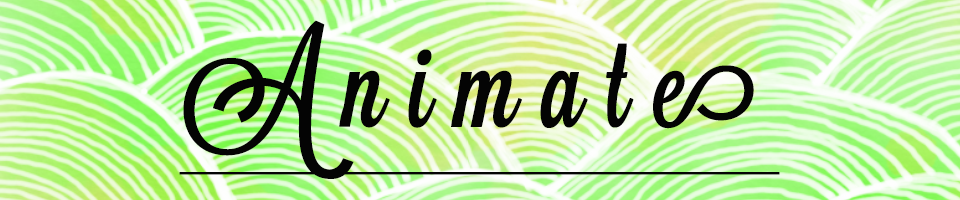
<style>
.page{position:relative;width:960px;height:200px}
.page>*{position:absolute;margin:0}
.t1{font:120px "Lavanderia-Sturdy";letter-spacing:0.2em;color:#040404;text-decoration:underline}
</style>
<div class="page">
<p class="t1" style="left:179px;top:20px;width:601px;height:159px">Animate</p>
</div>
